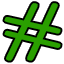
<style>
.page{position:relative;width:64px;height:64px;background:#ffffff}
.page>*{position:absolute;margin:0}
.t1{font:71px "CalifornianFB-Bold";color:#2aa000;font-weight:bold;scale:1.37 1}
</style>
<div class="page">
<p class="t1" style="left:4px;top:3px;width:57px;height:58px">#</p>
</div>
